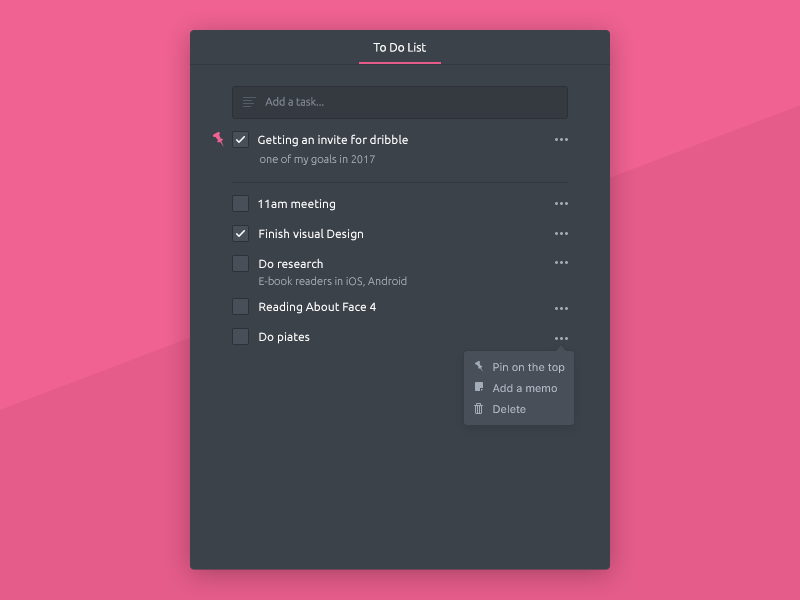
<style>
.page{position:relative;width:800px;height:600px;background:#3c424a}
.page>*{position:absolute;margin:0}
.t1{font:12px "Ubuntu-Light";color:#ffffff}
.t2{font:11px "Ubuntu-Light";color:#818791}
.t3{font:12px "Ubuntu-Regular";color:#ffffff}
.t4{font:11px "Ubuntu-Light";color:#a9b1ba}
</style>
<div class="page">
<p class="t1" style="left:373px;top:42px;width:53px;height:10px">To Do List</p>
<p class="t2" style="left:265px;top:96px;width:59px;height:10px">Add a task...</p>
<p class="t3" style="left:258px;top:134px;width:150px;height:13px">Getting an invite for dribble</p>
<p class="t4" style="left:260px;top:154px;width:115px;height:11px">one of my goals in 2017</p>
<p class="t3" style="left:258px;top:199px;width:77px;height:12px">11am meeting</p>
<p class="t3" style="left:259px;top:228px;width:104px;height:13px">Finish visual Design</p>
<p class="t3" style="left:259px;top:258px;width:64px;height:10px">Do research</p>
<p class="t4" style="left:259px;top:276px;width:148px;height:11px">E-book readers in iOS, Android</p>
<p class="t3" style="left:259px;top:301px;width:117px;height:13px">Reading About Face 4</p>
<p class="t3" style="left:259px;top:332px;width:51px;height:12px">Do piates</p>
</div>
